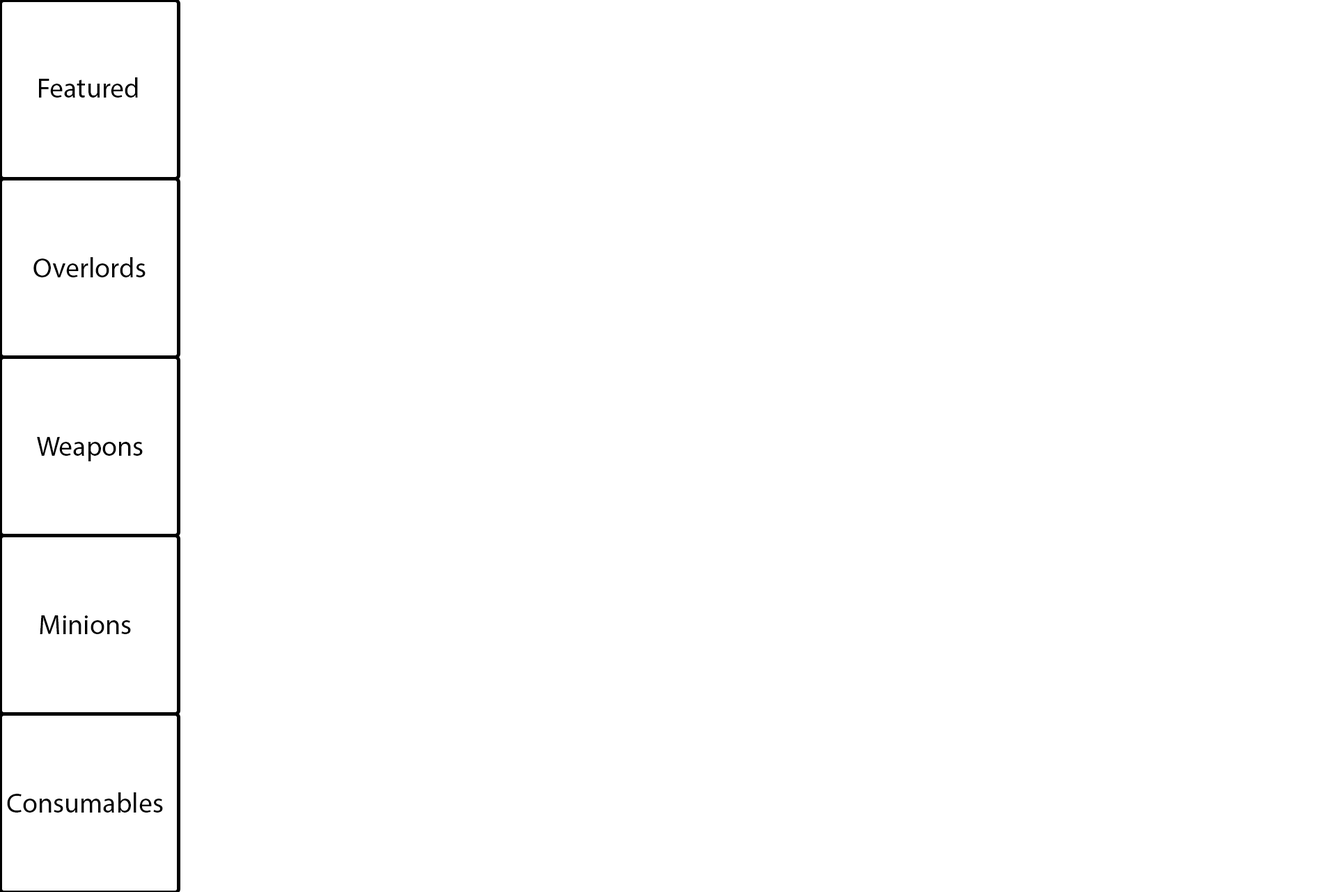
<style>
.page{position:relative;width:1337px;height:892px;background:#ffffff}
.page>*{position:absolute;margin:0}
.t1{font:27.9px "MyriadPro-Regular";color:#000000}
</style>
<div class="page">
<p class="t1" style="left:39px;top:77px;width:99px;height:21px">Featured</p>
<p class="t1" style="left:33px;top:257px;width:113px;height:20px">Overlords</p>
<p class="t1" style="left:37px;top:437px;width:106px;height:24px">Weapons</p>
<p class="t1" style="left:40px;top:615px;width:91px;height:19px">Minions</p>
<p class="t1" style="left:7px;top:792px;width:156px;height:20px">Consumables</p>
</div>
